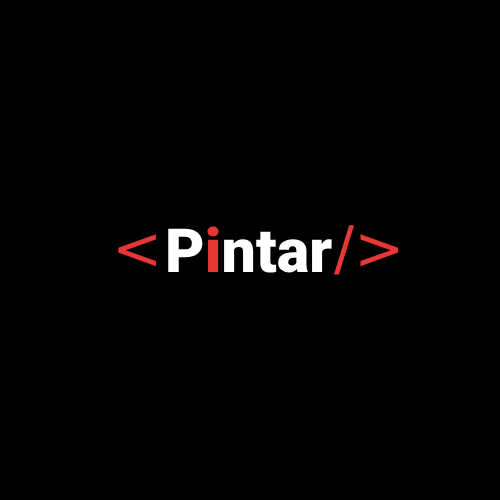
<style>
.page{position:relative;width:500px;height:500px;background:#000000}
.page>*{position:absolute;margin:0}
.t1{font:61px "Roboto-Black";color:#ffffff}
.t2{font:61px "Roboto-Black";color:#e73737}
</style>
<div class="page">
<p class="t1" style="left:168px;top:226px;width:164px;height:47px">P<span class="t2">i</span>ntar</p>
</div>
